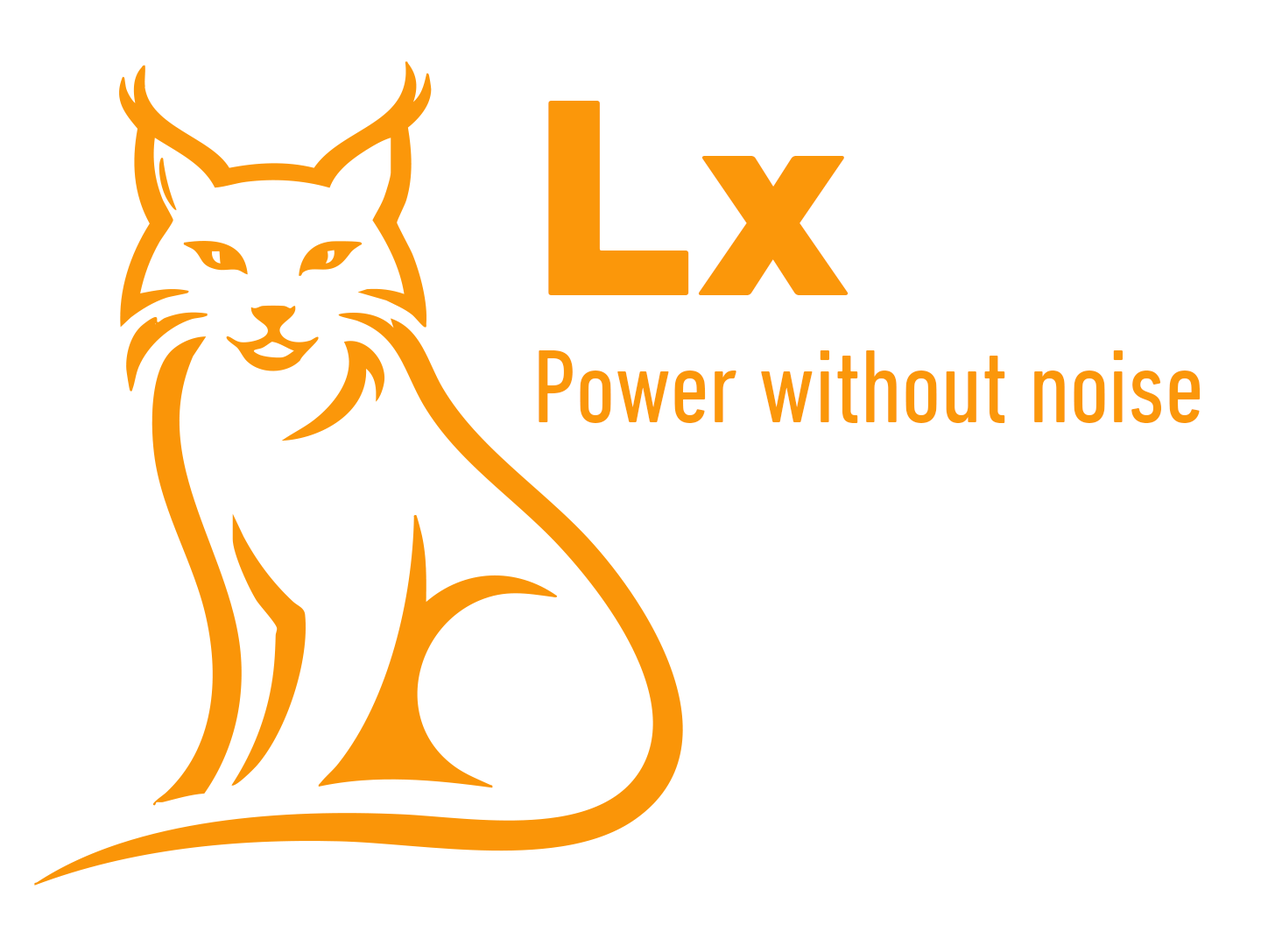
<style>
.page{position:relative;width:1261px;height:946px;background:#ffffff}
.page>*{position:absolute;margin:0}
.t1{font:105.7px "DINNextLTPro-Condensed";color:#fb970a}
.t2{font:286.4px "DINNextLTPro-Heavy";color:#fb970a}
</style>
<div class="page">
<p class="t1" style="left:539px;top:101px;width:661px;height:322px"><span class="t2">Lx<br></span>Power without noise</p>
</div>
